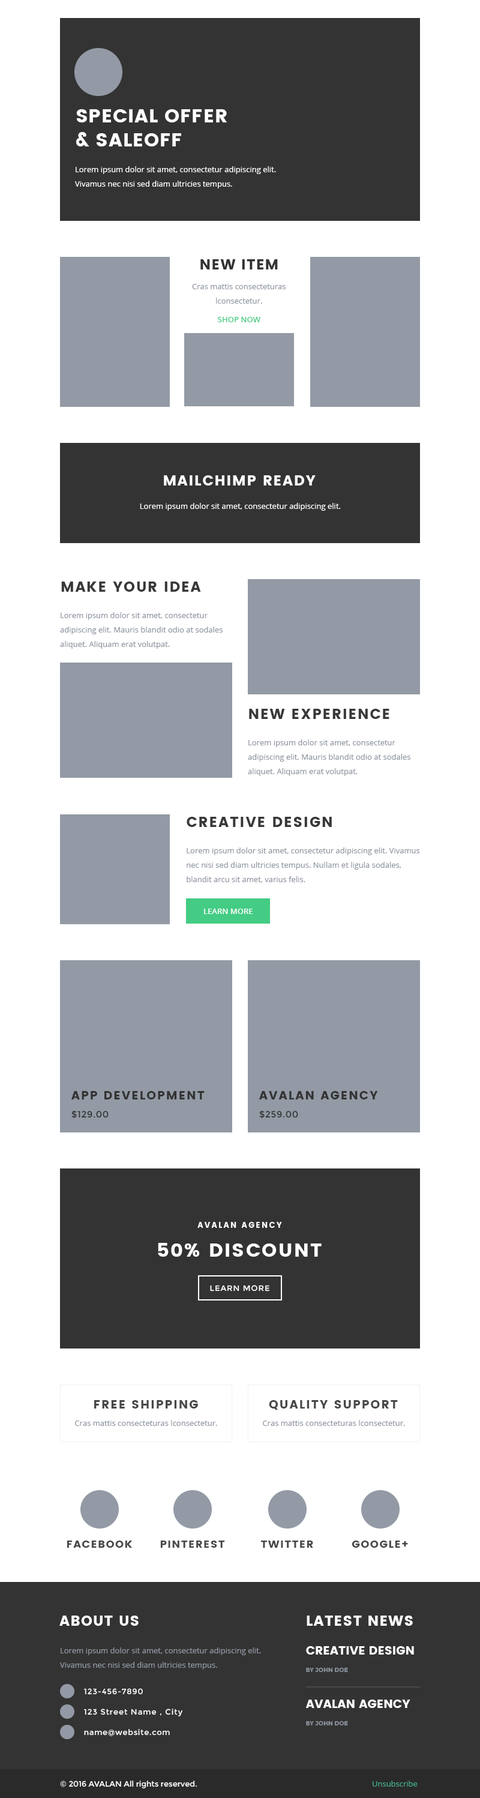
<style>
.page{position:relative;width:480px;height:1798px;background:#ffffff}
.page>*{position:absolute;margin:0}
.t1{font:19.2px "Poppins";letter-spacing:0.025em;color:#ffffff}
.t2{font:7.8px/14.4px "OpenSans";color:#ffffff}
.t3{font:14.4px "Poppins";letter-spacing:0.05em;color:#333333}
.t4{font:7.8px/14.4px "OpenSans";color:#8f96a1}
.t5{font:7.8px "OpenSans-Semibold";color:#44cc84}
.t6{font:14.4px "Poppins";letter-spacing:0.075em;color:#ffffff}
.t7{font:7.8px "OpenSans";color:#ffffff}
.t8{font:14.4px "Poppins";letter-spacing:0.075em;color:#383838}
.t9{font:14.4px "Poppins";letter-spacing:0.08em;color:#383838}
.t10{font:7.8px "OpenSans-Semibold";color:#ffffff}
.t11{font:12px "Poppins";letter-spacing:0.1em;color:#333333}
.t12{font:9px "Montserrat-Regular";letter-spacing:0.05em;color:#333333}
.t13{font:7.8px "Poppins";letter-spacing:0.175em;color:#ffffff}
.t14{font:19.2px "Poppins";letter-spacing:0.075em;color:#ffffff}
.t15{font:7.8px "Montserrat-Regular";letter-spacing:0.075em;color:#ffffff}
.t16{font:12px "Poppins";letter-spacing:0.1em;color:#484848}
.t17{font:7.8px "OpenSans";color:#8f96a1}
.t18{font:10.8px "Poppins";letter-spacing:0.075em;color:#484848}
.t19{font:14.4px "Poppins";letter-spacing:0.05em;color:#ffffff}
.t20{font:12px "Poppins";color:#ffffff}
.t21{font:6px "Montserrat-Bold";color:#8f96a1}
.t22{font:7.8px "Montserrat-Regular";letter-spacing:0.05em;color:#ffffff}
.t23{font:7.8px "Montserrat-Regular";color:#ffffff}
.t24{font:7.8px "OpenSans";color:#44ac84}
</style>
<div class="page">
<p class="t1" style="left:76px;top:109px;width:151px;height:13px">SPECIAL OFFER</p>
<p class="t1" style="left:76px;top:132px;width:105px;height:14px">&amp; SALEOFF</p>
<p class="t2" style="left:75px;top:166px;width:201px;height:22px">Lorem ipsum dolor sit amet, consectetur adipiscing elit. Vivamus nec nisi sed diam ultricies tempus.</p>
<p class="t3" style="left:200px;top:259px;width:78px;height:10px">NEW ITEM</p>
<p class="t4" style="left:192px;top:284px;width:94px;height:20px;text-align:center">Cras mattis consecteturas lconsectetur.</p>
<p class="t5" style="left:218px;top:317px;width:42px;height:5px">SHOP NOW</p>
<p class="t6" style="left:164px;top:475px;width:152px;height:10px">MAILCHIMP READY</p>
<p class="t7" style="left:140px;top:503px;width:201px;height:8px">Lorem ipsum dolor sit amet, consectetur adipiscing elit.</p>
<p class="t8" style="left:61px;top:581px;width:140px;height:11px">MAKE YOUR IDEA</p>
<p class="t4" style="left:60px;top:612px;width:163px;height:37px">Lorem ipsum dolor sit amet, consectetur adipiscing elit. Mauris blandit odio at sodales aliquet. Aliquam erat volutpat.</p>
<p class="t8" style="left:249px;top:709px;width:140px;height:10px">NEW EXPERIENCE</p>
<p class="t4" style="left:248px;top:739px;width:162px;height:37px">Lorem ipsum dolor sit amet, consectetur adipiscing elit. Mauris blandit odio at sodales aliquet. Aliquam erat volutpat.</p>
<p class="t9" style="left:187px;top:817px;width:145px;height:10px">CREATIVE DESIGN</p>
<p class="t4" style="left:187px;top:847px;width:233px;height:36px">Lorem ipsum dolor sit amet, consectetur adipiscing elit. Vivamus nec nisi sed diam ultricies tempus. Nullam et ligula sodales, blandit arcu sit amet, varius felis.</p>
<p class="t10" style="left:204px;top:908px;width:49px;height:6px">LEARN MORE</p>
<p class="t11" style="left:71px;top:1091px;width:134px;height:8px">APP DEVELOPMENT</p>
<p class="t11" style="left:259px;top:1091px;width:119px;height:8px">AVALAN AGENCY</p>
<p class="t12" style="left:71px;top:1110px;width:38px;height:8px">$129.00</p>
<p class="t12" style="left:259px;top:1110px;width:39px;height:8px">$259.00</p>
<p class="t13" style="left:197px;top:1222px;width:85px;height:6px">AVALAN AGENCY</p>
<p class="t14" style="left:158px;top:1243px;width:164px;height:13px">50% DISCOUNT</p>
<p class="t15" style="left:210px;top:1285px;width:59px;height:6px">LEARN MORE</p>
<p class="t16" style="left:94px;top:1400px;width:104px;height:8px">FREE SHIPPING</p>
<p class="t16" style="left:269px;top:1400px;width:129px;height:9px">QUALITY SUPPORT</p>
<p class="t17" style="left:75px;top:1420px;width:142px;height:6px">Cras mattis consecteturas lconsectetur.</p>
<p class="t17" style="left:263px;top:1420px;width:142px;height:6px">Cras mattis consecteturas lconsectetur.</p>
<p class="t18" style="left:67px;top:1540px;width:66px;height:7px">FACEBOOK</p>
<p class="t18" style="left:160px;top:1540px;width:65px;height:7px">PINTEREST</p>
<p class="t18" style="left:261px;top:1540px;width:52px;height:7px">TWITTER</p>
<p class="t18" style="left:352px;top:1540px;width:56px;height:7px">GOOGLE+</p>
<p class="t19" style="left:59px;top:1615px;width:80px;height:10px">ABOUT US</p>
<p class="t19" style="left:307px;top:1615px;width:106px;height:10px">LATEST NEWS</p>
<p class="t4" style="left:60px;top:1647px;width:201px;height:22px">Lorem ipsum dolor sit amet, consectetur adipiscing elit. Vivamus nec nisi sed diam ultricies tempus.</p>
<p class="t20" style="left:306px;top:1646px;width:108px;height:8px">CREATIVE DESIGN</p>
<p class="t21" style="left:306px;top:1667px;width:42px;height:5px">BY JOHN DOE</p>
<p class="t15" style="left:84px;top:1688px;width:59px;height:6px">123-456-7890</p>
<p class="t15" style="left:84px;top:1708px;width:98px;height:8px">123 Street Name , City</p>
<p class="t20" style="left:305px;top:1699px;width:105px;height:9px">AVALAN AGENCY</p>
<p class="t21" style="left:306px;top:1720px;width:42px;height:6px">BY JOHN DOE</p>
<p class="t22" style="left:84px;top:1729px;width:86px;height:7px">name@website.com</p>
<p class="t23" style="left:60px;top:1780px;width:137px;height:8px">© 2016 AVALAN All rights reserved.</p>
<p class="t24" style="left:373px;top:1780px;width:45px;height:6px">Unsubscribe</p>
</div>
